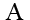
<style>
.page{position:relative;width:30px;height:20px;background:#ffffff}
.page>*{position:absolute;margin:0}
.t1{font:25px "TimesNewRomanPSMT";color:#000000}
</style>
<div class="page">
<p class="t1" style="left:5px;top:3px;width:19px;height:17px">A</p>
</div>
